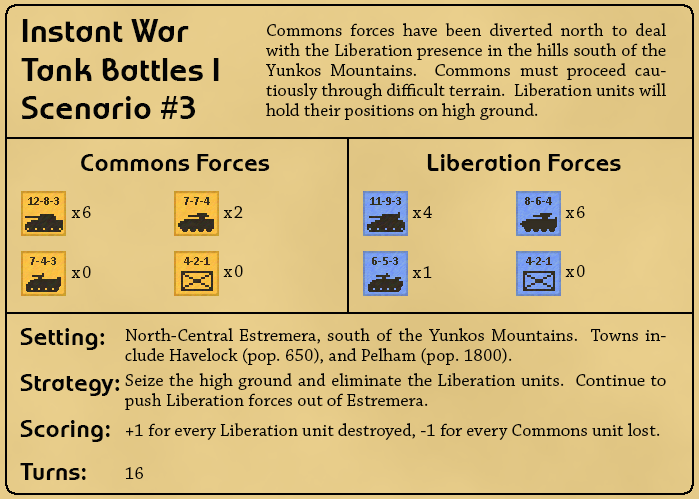
<style>
.page{position:relative;width:699px;height:499px}
.page>*{position:absolute;margin:0}
.t1{font:32px "WorldofWater-Regular";letter-spacing:0.01em;color:#030303}
.t2{font:18px/20px "ChaparralPro-Regular";letter-spacing:0.01em;color:#030303}
.t3{font:24px "WorldofWater-Regular";letter-spacing:0.01em;color:#030303}
.t4{font:18px "ChaparralPro-Regular";letter-spacing:0.1em;color:#030303}
.t5{font:18px "ChaparralPro-Regular";letter-spacing:0.01em;color:#030303}
</style>
<div class="page">
<p class="t1" style="left:21px;top:19px;width:198px;height:100px">Instant War<br>Tank Battles I<br>Scenario #3</p>
<p class="t2" style="left:266px;top:23px;width:400px;height:97px;text-align:justify">Commons forces have been diverted north to deal with the Liberation presence in the hills south of the Yunkos Mountains.  Commons must proceed cautiously through difficult terrain.  Liberation units will hold their positions on high ground.</p>
<p class="t3" style="left:81px;top:154px;width:189px;height:17px">Commons Forces</p>
<p class="t3" style="left:427px;top:154px;width:194px;height:17px">Liberation Forces</p>
<p class="t4" style="left:71px;top:206px;width:20px;height:12px">x6</p>
<p class="t4" style="left:223px;top:206px;width:20px;height:12px">x2</p>
<p class="t4" style="left:412px;top:206px;width:20px;height:12px">x4</p>
<p class="t4" style="left:565px;top:206px;width:20px;height:12px">x6</p>
<p class="t4" style="left:71px;top:266px;width:20px;height:12px">x0</p>
<p class="t4" style="left:223px;top:265px;width:20px;height:12px">x0</p>
<p class="t4" style="left:412px;top:266px;width:20px;height:12px">x1</p>
<p class="t4" style="left:565px;top:265px;width:20px;height:12px">x0</p>
<p class="t3" style="left:20px;top:328px;width:85px;height:22px">Setting:</p>
<p class="t2" style="left:125px;top:328px;width:541px;height:37px;text-align:justify">North-Central Estremera, south of the Yunkos Mountains.  Towns include Havelock (pop. 650), and Pelham (pop. 1800).</p>
<p class="t3" style="left:20px;top:374px;width:100px;height:22px">Strategy:</p>
<p class="t2" style="left:125px;top:373px;width:541px;height:37px;text-align:justify">Seize the high ground and eliminate the Liberation units.  Continue to push Liberation forces out of Estremera.</p>
<p class="t3" style="left:20px;top:420px;width:90px;height:22px">Scoring:</p>
<p class="t5" style="left:126px;top:423px;width:534px;height:17px">+1 for every Liberation unit destroyed, -1 for every Commons unit lost.</p>
<p class="t3" style="left:20px;top:463px;width:66px;height:17px">Turns:</p>
<p class="t5" style="left:125px;top:467px;width:18px;height:12px">16</p>
</div>
